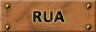
<style>
.page{position:relative;width:96px;height:32px}
.page>*{position:absolute;margin:0}
.t1{font:17.3px "Calibri-Bold";letter-spacing:0.005em;text-transform:uppercase;font-weight:bold}
</style>
<div class="page">
<p class="t1" style="left:32px;top:10px;width:33px;height:13px">rua</p>
</div>
